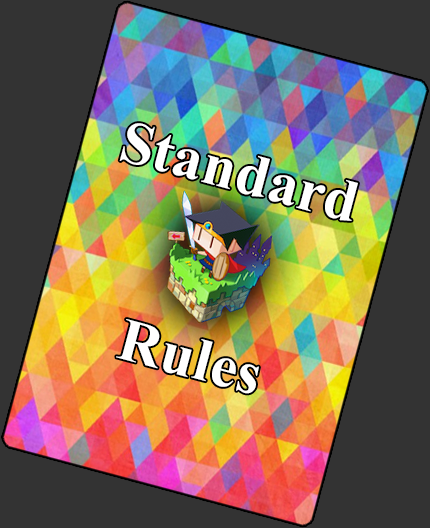
<style>
.page{position:relative;width:430px;height:528px;background:#333333}
.page>*{position:absolute;margin:0}
.t1{font:60px/48px "TimesNewRomanPS-BoldMT";letter-spacing:0.01em;color:#ffffff}
</style>
<div class="page">
<p class="t1" style="left:116px;top:123px;width:242px;height:271px;text-align:center;rotate:15deg">Standard<br><br><br><br>Rules</p>
</div>
